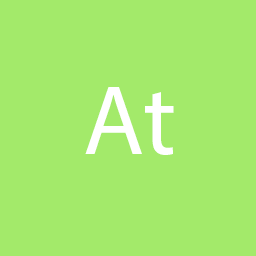
<style>
.page{position:relative;width:256px;height:256px;background:#a3ea6a}
.page>*{position:absolute;margin:0}
.t1{font:100px "MyriadPro-Regular";color:#ffffff}
</style>
<div class="page">
<p class="t1" style="left:85px;top:87px;width:89px;height:68px">At</p>
</div>
